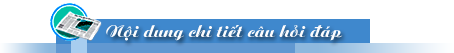
<style>
.page{position:relative;width:454px;height:53px;background:#ffffff}
.page>*{position:absolute;margin:0}
.t1{font:18px "VNI-Ariston";color:#fcfcfd}
</style>
<div class="page">
<p class="t1" style="left:106px;top:25px;width:237px;height:16px">Noäi dung chi tieát caâu hoûi ñaùp</p>
</div>
